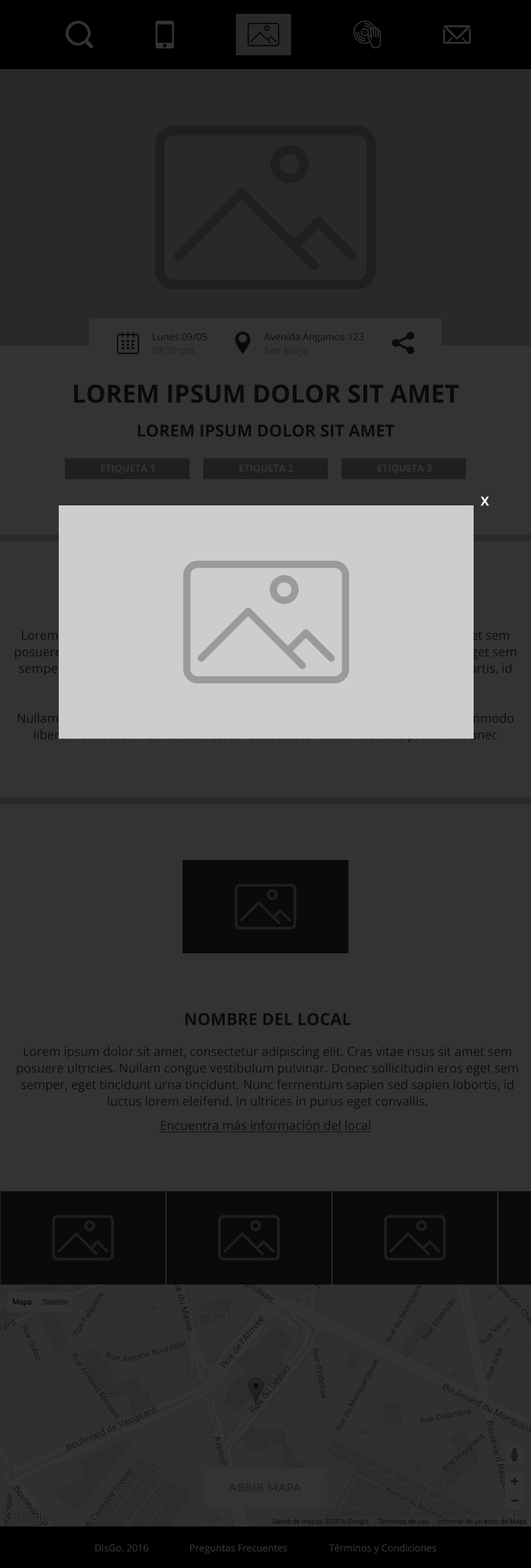
<style>
.page{position:relative;width:531px;height:1568px;background:#333333}
.page>*{position:absolute;margin:0}
.t1{font:9.7px/13.9px "OpenSans"}
.t2{font:25px "OpenSans-Bold";color:#0a0a0a;text-transform:uppercase}
.t3{font:16.7px "OpenSans-Bold";color:#0a0a0a;text-transform:uppercase}
.t4{font:9.7px "OpenSans-Bold";color:#333333;text-transform:uppercase}
.t5{font:12.4px "OpenSans-Bold";color:#ffffff}
.t6{font:16.6px "OpenSans-Bold";color:#0a0a0a;text-transform:uppercase}
.t7{font:12.4px/16.6px "OpenSans";color:#0a0a0a}
.t8{font:12.4px "OpenSans";color:#0a0a0a;text-decoration:underline}
.t9{font:9.7px "OpenSans";color:#333333}
</style>
<div class="page">
<p class="t1" style="left:152px;top:333px;width:55px;height:24px">Lunes 09/05<br>08:30 pm.</p>
<p class="t1" style="left:264px;top:333px;width:100px;height:24px">Avenida Angamos 123<br>San Borja</p>
<p class="t2" style="left:74px;top:384px;width:385px;height:19px">Lorem ipsum dolor sit amet</p>
<p class="t3" style="left:138px;top:424px;width:257px;height:13px">Lorem ipsum dolor sit amet</p>
<p class="t4" style="left:101px;top:465px;width:53px;height:9px">Etiqueta 1</p>
<p class="t4" style="left:239px;top:465px;width:55px;height:9px">Etiqueta 2</p>
<p class="t4" style="left:377px;top:465px;width:55px;height:9px">Etiqueta 3</p>
<p class="t5" style="left:480px;top:496px;width:9px;height:10px">X</p>
<p class="t6" style="left:185px;top:1013px;width:166px;height:12px">Nombre del Local</p>
<p class="t7" style="left:17px;top:1046px;width:501px;height:63px;text-align:center">Lorem ipsum dolor sit amet, consectetur adipiscing elit. Cras vitae risus sit amet sem posuere ultricies. Nullam congue vestibulum pulvinar. Donec sollicitudin eros eget sem semper, eget tincidunt urna tincidunt. Nunc fermentum sapien sed sapien lobortis, id luctus lorem eleifend. In ultrices in purus eget convallis.</p>
<p class="t8" style="left:160px;top:1120px;width:211px;height:12px">Encuentra más información del local</p>
<p class="t9" style="left:95px;top:1544px;width:54px;height:8px">DisGo. 2016</p>
<p class="t9" style="left:190px;top:1544px;width:97px;height:10px">Preguntas Frecuentes</p>
<p class="t9" style="left:328px;top:1544px;width:108px;height:10px">Términos y Condiciones</p>
</div>
